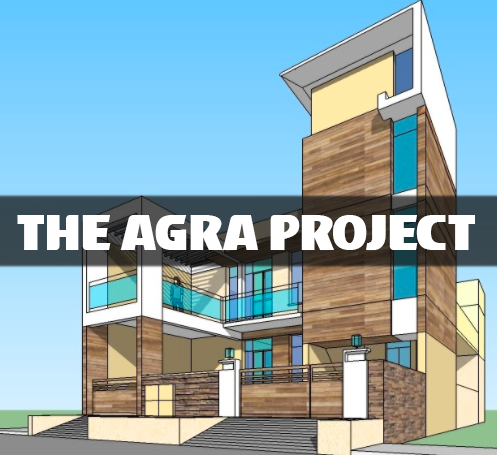
<style>
.page{position:relative;width:497px;height:455px}
.page>*{position:absolute;margin:0}
.t1{font:50px "Magistros-Regular";color:#ffffff}
</style>
<div class="page">
<p class="t1" style="left:17px;top:215px;width:458px;height:35px">the AGRA project</p>
</div>
